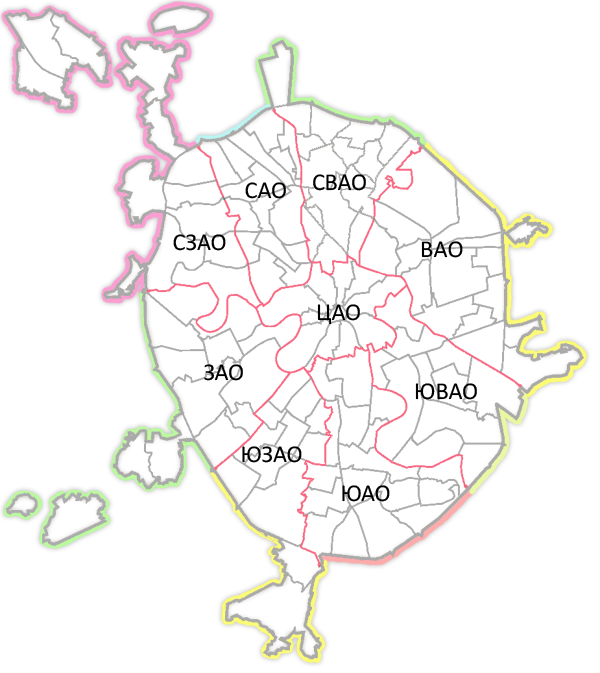
<style>
.page{position:relative;width:600px;height:673px;background:#ffffff}
.page>*{position:absolute;margin:0}
.t1{font:24.3px "Calibri";color:#000000}
</style>
<div class="page">
<p class="t1" style="left:313px;top:174px;width:53px;height:17px">СВАО</p>
<p class="t1" style="left:245px;top:182px;width:41px;height:17px">САО</p>
<p class="t1" style="left:173px;top:234px;width:53px;height:17px">СЗАО</p>
<p class="t1" style="left:421px;top:241px;width:42px;height:17px">ВАО</p>
<p class="t1" style="left:317px;top:304px;width:43px;height:21px">ЦАО</p>
<p class="t1" style="left:204px;top:364px;width:39px;height:17px">ЗАО</p>
<p class="t1" style="left:415px;top:383px;width:62px;height:17px">ЮВАО</p>
<p class="t1" style="left:242px;top:446px;width:60px;height:17px">ЮЗАО</p>
<p class="t1" style="left:342px;top:485px;width:48px;height:17px">ЮАО</p>
</div>
